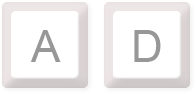
<style>
.page{position:relative;width:196px;height:94px;background:#ffffff}
.page>*{position:absolute;margin:0}
.t1{font:44.1px "ArialMT";letter-spacing:0.09em;color:#979797}
</style>
<div class="page">
<p class="t1" style="left:30px;top:30px;width:31px;height:32px">A</p>
<p class="t1" style="left:134px;top:30px;width:27px;height:32px">D</p>
</div>
